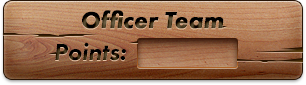
<style>
.page{position:relative;width:306px;height:85px}
.page>*{position:absolute;margin:0}
.t1{font:24px "FuturaPT-HeavyObl";font-weight:bold}
.t2{font:24px "FuturaPT-HeavyObl"}
</style>
<div class="page">
<p class="t1" style="left:82px;top:10px;width:142px;height:19px">Officer Team</p>
<p class="t2" style="left:55px;top:42px;width:71px;height:19px">Points:</p>
</div>
